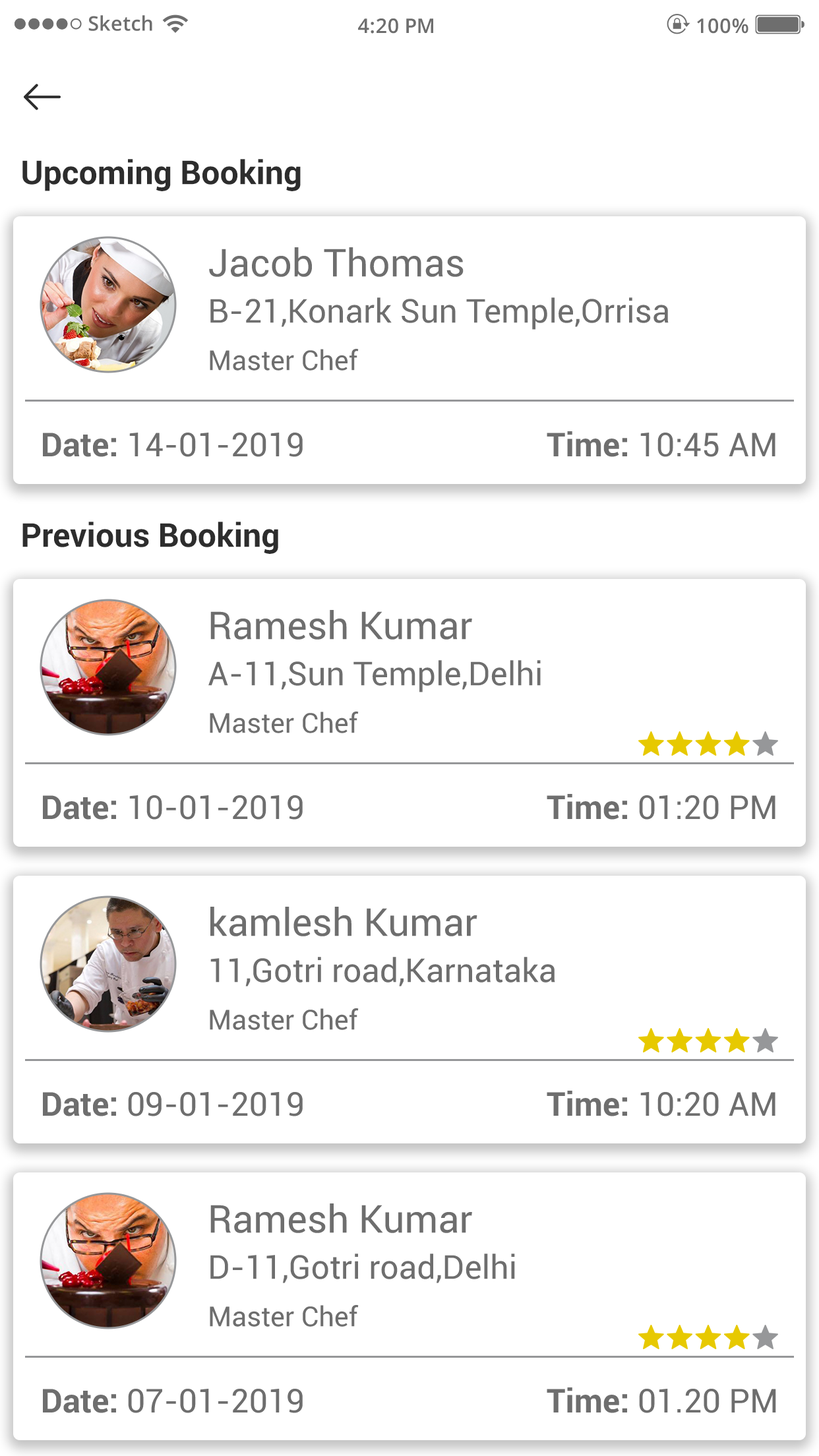
<style>
.page{position:relative;width:819px;height:1456px;background:#ffffff}
.page>*{position:absolute;margin:0}
.t1{font:20.1px "OpenSans-Semibold";color:#6e6e6e}
.t2{font:33px "Roboto-Bold";color:#2d2d2d}
.t3{font:38.5px "Roboto-Regular";color:#6e6e6e}
.t4{font:33px "Roboto-Regular";color:#6e6e6e}
.t5{font:27.5px "Roboto-Regular";color:#6e6e6e}
.t6{font:33px "Roboto-Bold";color:#6e6e6e}
</style>
<div class="page">
<p class="t1" style="left:88px;top:15px;width:64px;height:16px">Sketch</p>
<p class="t1" style="left:358px;top:18px;width:75px;height:16px">4:20 PM</p>
<p class="t1" style="left:697px;top:18px;width:51px;height:16px">100%</p>
<p class="t2" style="left:22px;top:159px;width:279px;height:32px">Upcoming Booking</p>
<p class="t3" style="left:209px;top:247px;width:255px;height:30px">Jacob Thomas</p>
<p class="t4" style="left:210px;top:297px;width:459px;height:33px">B-21,Konark Sun Temple,Orrisa</p>
<p class="t5" style="left:210px;top:349px;width:149px;height:22px">Master Chef</p>
<p class="t4" style="left:43px;top:433px;width:260px;height:24px"><span class="t6">Date:</span> 14-01-2019</p>
<p class="t4" style="left:547px;top:431px;width:228px;height:26px"><span class="t6">Time:</span> 10:45 AM</p>
<p class="t2" style="left:22px;top:522px;width:256px;height:32px">Previous Booking</p>
<p class="t3" style="left:210px;top:610px;width:262px;height:30px">Ramesh Kumar</p>
<p class="t4" style="left:208px;top:660px;width:333px;height:32px">A-11,Sun Temple,Delhi</p>
<p class="t5" style="left:210px;top:712px;width:149px;height:21px">Master Chef</p>
<p class="t4" style="left:43px;top:795px;width:260px;height:25px"><span class="t6">Date:</span> 10-01-2019</p>
<p class="t4" style="left:547px;top:794px;width:228px;height:26px"><span class="t6">Time:</span> 01:20 PM</p>
<p class="t3" style="left:210px;top:907px;width:267px;height:29px">kamlesh Kumar</p>
<p class="t4" style="left:210px;top:957px;width:345px;height:29px">11,Gotri road,Karnataka</p>
<p class="t5" style="left:210px;top:1008px;width:149px;height:22px">Master Chef</p>
<p class="t4" style="left:43px;top:1092px;width:260px;height:24px"><span class="t6">Date:</span> 09-01-2019</p>
<p class="t4" style="left:547px;top:1091px;width:228px;height:25px"><span class="t6">Time:</span> 10:20 AM</p>
<p class="t3" style="left:210px;top:1203px;width:262px;height:30px">Ramesh Kumar</p>
<p class="t4" style="left:210px;top:1254px;width:305px;height:29px">D-11,Gotri road,Delhi</p>
<p class="t5" style="left:210px;top:1305px;width:149px;height:22px">Master Chef</p>
<p class="t4" style="left:43px;top:1389px;width:260px;height:24px"><span class="t6">Date:</span> 07-01-2019</p>
<p class="t4" style="left:547px;top:1387px;width:229px;height:26px"><span class="t6">Time:</span> 01.20 PM</p>
</div>
